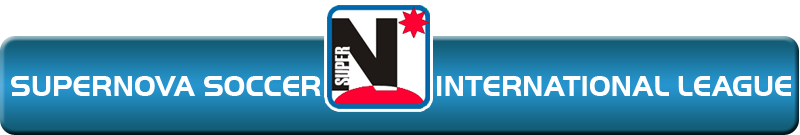
<style>
.page{position:relative;width:800px;height:135px;background:#ffffff}
.page>*{position:absolute;margin:0}
.t1{font:30px "HandelGotD-Bold";color:#ffffff}
</style>
<div class="page">
<p class="t1" style="left:11px;top:76px;width:310px;height:20px">SUPERNOVA SOCCER</p>
<p class="t1" style="left:437px;top:76px;width:354px;height:20px">INTERNATIONAL LEAGUE</p>
</div>
